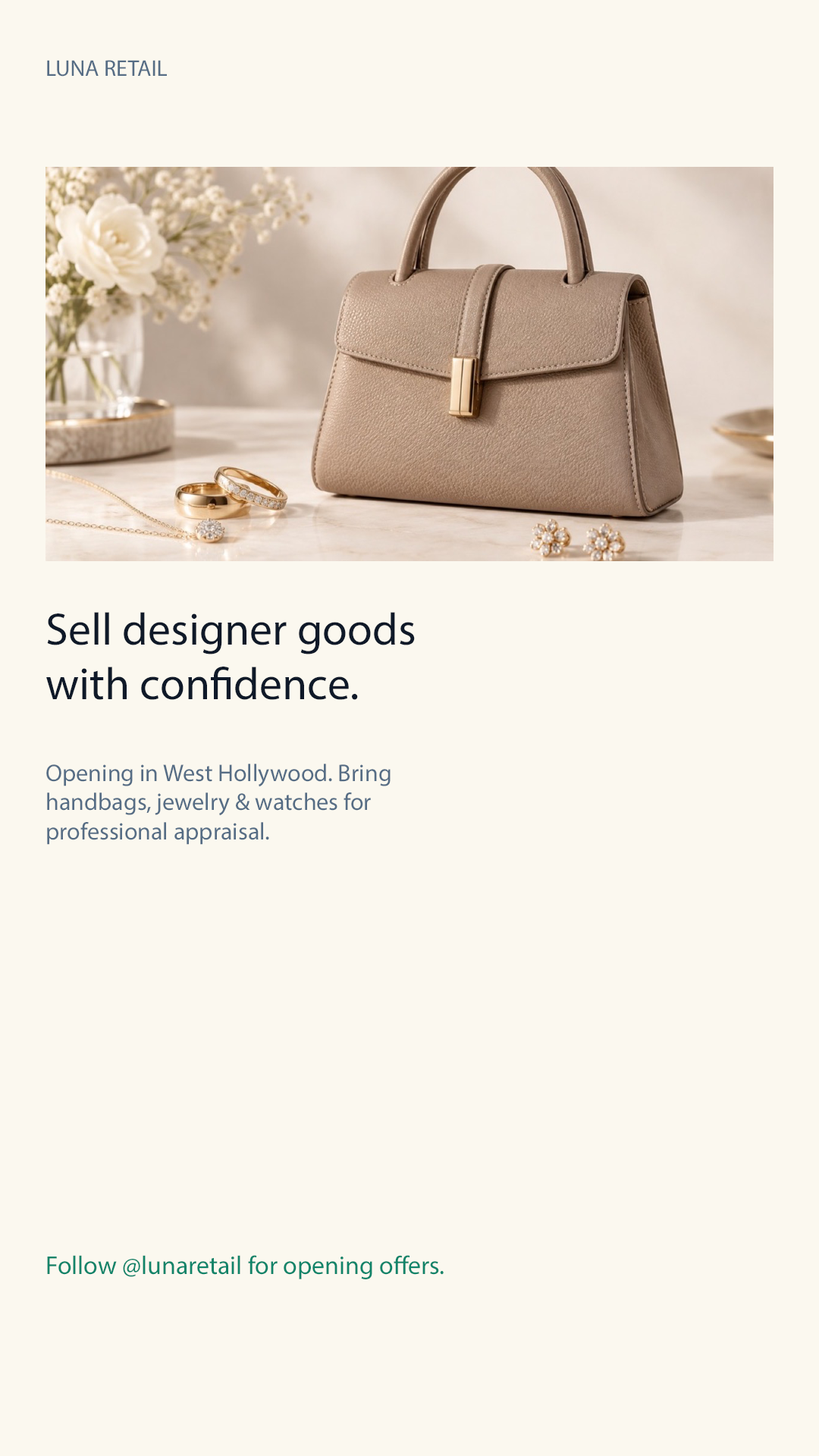
<style>
.page{position:relative;width:819px;height:1456px;background:#fbf8ef}
.page>*{position:absolute;margin:0}
.t1{font:22.7px "MyriadPro-Regular";color:#566d85}
.t2{font:45.5px "MyriadPro-Regular";color:#0f1928}
.t3{font:24.3px "MyriadPro-Regular";color:#566d85}
.t4{font:25.8px "MyriadPro-Regular";color:#0f8469}
</style>
<div class="page">
<p class="t1" style="left:47px;top:60px;width:120px;height:17px">LUNA RETAIL</p>
<p class="t2" style="left:46px;top:612px;width:369px;height:88px">Sell designer goods<br>with confidence.</p>
<p class="t3" style="left:46px;top:764px;width:345px;height:81px">Opening in West Hollywood. Bring<br>handbags, jewelry &amp; watches for<br>professional appraisal.</p>
<p class="t4" style="left:47px;top:1255px;width:397px;height:24px">Follow @lunaretail for opening offers.</p>
</div>
